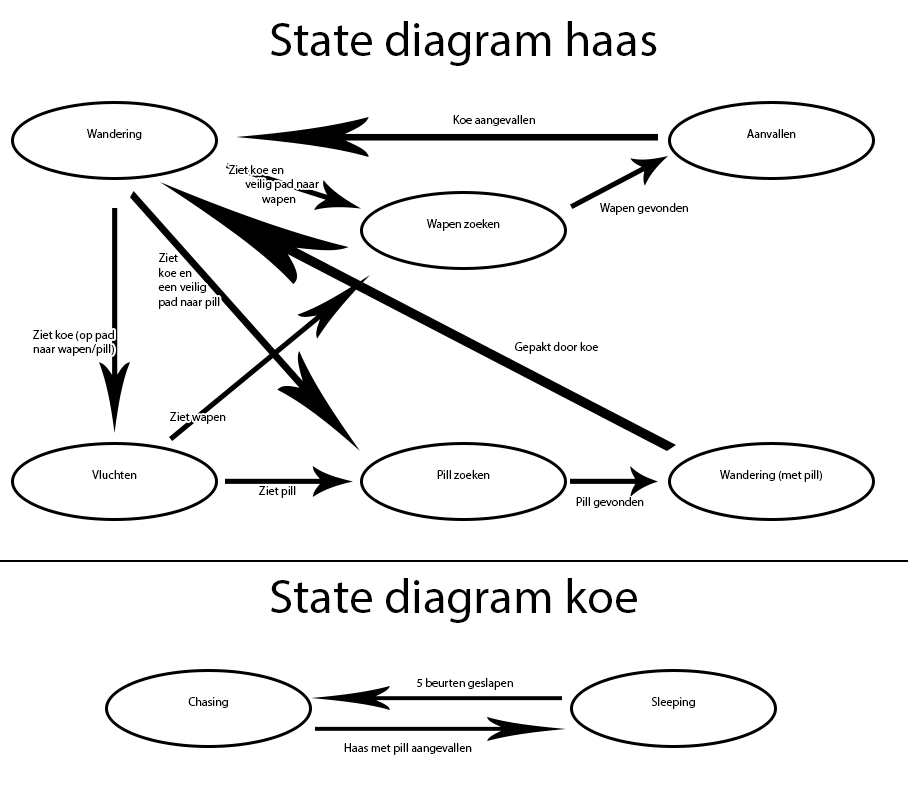
<style>
.page{position:relative;width:908px;height:810px;background:#ffffff}
.page>*{position:absolute;margin:0}
.t1{font:48.8px "MyriadPro-Regular";color:#000000}
.t2{font:12px "MyriadPro-Regular";color:#000000}
</style>
<div class="page">
<p class="t1" style="left:271px;top:21px;width:386px;height:45px">State diagram haas</p>
<p class="t2" style="left:453px;top:115px;width:82px;height:11px">Koe aangevallen</p>
<p class="t2" style="left:87px;top:129px;width:55px;height:11px">Wandering</p>
<p class="t2" style="left:747px;top:129px;width:49px;height:9px">Aanvallen</p>
<p class="t2" style="left:228px;top:165px;width:91px;height:41px">Ziet koe en veilig pad naar wapen</p>
<p class="t2" style="left:600px;top:203px;width:88px;height:12px">Wapen gevonden</p>
<p class="t2" style="left:426px;top:219px;width:74px;height:12px">Wapen zoeken</p>
<p class="t2" style="left:158px;top:253px;width:62px;height:56px">Ziet koe en een veilig pad naar pill</p>
<p class="t2" style="left:33px;top:330px;width:81px;height:26px">Ziet koe (op pad naar wapen/pill)</p>
<p class="t2" style="left:515px;top:342px;width:83px;height:12px">Gepakt door koe</p>
<p class="t2" style="left:170px;top:412px;width:56px;height:12px">Ziet wapen</p>
<p class="t2" style="left:92px;top:470px;width:45px;height:9px">Vluchten</p>
<p class="t2" style="left:437px;top:470px;width:53px;height:9px">Pill zoeken</p>
<p class="t2" style="left:720px;top:470px;width:102px;height:12px">Wandering (met pill)</p>
<p class="t2" style="left:259px;top:486px;width:37px;height:12px">Ziet pill</p>
<p class="t2" style="left:576px;top:497px;width:68px;height:11px">Pill gevonden</p>
<p class="t1" style="left:271px;top:578px;width:366px;height:45px">State diagram koe</p>
<p class="t2" style="left:417px;top:678px;width:96px;height:12px">5 beurten geslapen</p>
<p class="t2" style="left:188px;top:697px;width:40px;height:11px">Chasing</p>
<p class="t2" style="left:651px;top:697px;width:44px;height:12px">Sleeping</p>
<p class="t2" style="left:344px;top:743px;width:128px;height:12px">Haas met pill aangevallen</p>
</div>
